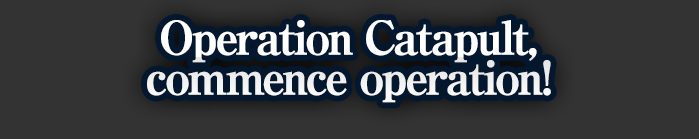
<style>
.page{position:relative;width:699px;height:139px;background:#333333}
.page>*{position:absolute;margin:0}
.t1{font:46px/40px "RyuminPro-ExBold";letter-spacing:-0.08em;color:#ffffff;font-weight:bold}
</style>
<div class="page">
<p class="t1" style="left:147px;top:20px;width:404px;height:83px;text-align:center">Operation Catapult,<br>commence operation!</p>
</div>
